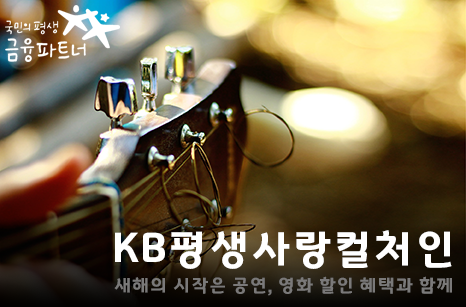
<style>
.page{position:relative;width:466px;height:307px}
.page>*{position:absolute;margin:0}
.t1{font:41.2px "GyeonggiTitleV";color:#ffffff}
.t2{font:18px "GyeonggiTitleV";color:#7a7979}
</style>
<div class="page">
<p class="t1" style="left:115px;top:230px;width:337px;height:39px">KB평생사랑컬처인</p>
<p class="t2" style="left:114px;top:276px;width:338px;height:20px">새해의 시작은 공연, 영화 할인 혜택과 함께</p>
</div>
